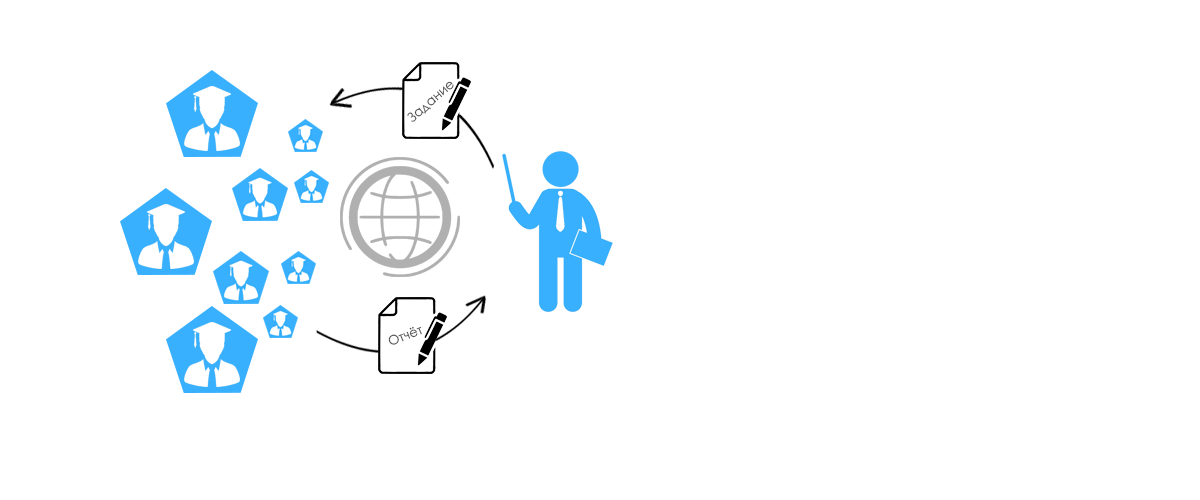
<style>
.page{position:relative;width:1200px;height:500px;background:#ffffff}
.page>*{position:absolute;margin:0}
.t1{font:13px "CenturyGothic";color:#4a4a4a}
</style>
<div class="page">
<p class="t1" style="left:407px;top:81px;width:47px;height:41px;rotate:-41deg">Задание</p>
<p class="t1" style="left:388px;top:326px;width:34px;height:19px;rotate:-21deg">Отчёт</p>
</div>
